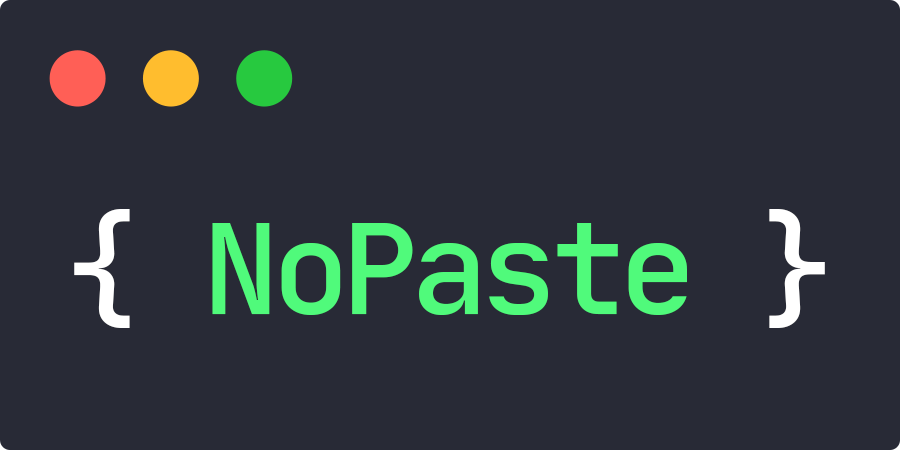
<style>
.page{position:relative;width:900px;height:450px;background:#282a36}
.page>*{position:absolute;margin:0}
.t1{font:126.3px "JetBrainsMono-Medium";letter-spacing:-0.05em;color:#50fa7b}
.t2{font:126.3px "JetBrainsMono-Medium";letter-spacing:-0.05em;color:#ffffff}
</style>
<div class="page">
<p class="t1" style="left:74px;top:209px;width:751px;height:119px"><span class="t2">{ </span>NoPaste<span class="t2"> }</span></p>
</div>
